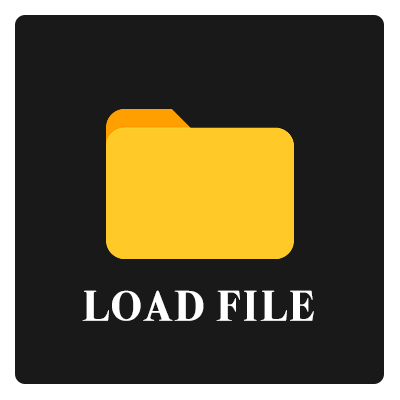
<style>
.page{position:relative;width:400px;height:400px;background:#191919}
.page>*{position:absolute;margin:0}
.t1{font:42.8px "SuperSmash4.1";color:#ffffff}
</style>
<div class="page">
<p class="t1" style="left:82px;top:290px;width:232px;height:31px">Load file</p>
</div>
